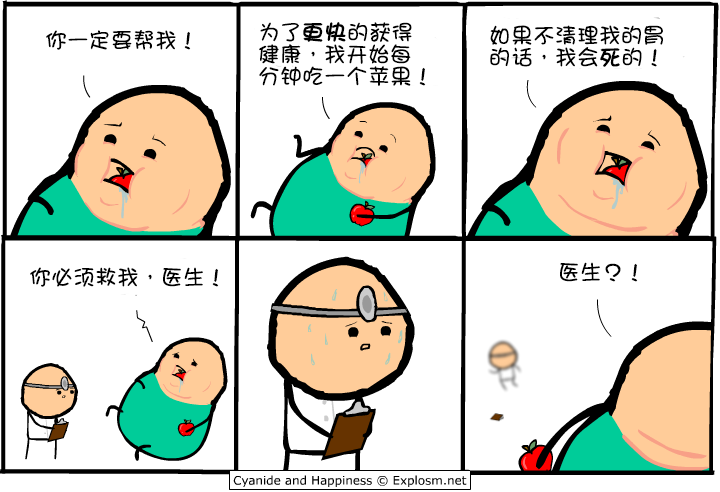
<style>
.page{position:relative;width:720px;height:492px;background:#ffffff}
.page>*{position:absolute;margin:0}
.t1{font:22px "DFGirl";color:#000000}
.t2{font:22px/22px "DFGirl";color:#000000}
.t3{font:22px/22px "DFGirl";color:#000000;font-weight:bold}
</style>
<div class="page">
<p class="t1" style="left:46px;top:30px;width:145px;height:20px">你一定要帮我！</p>
<p class="t2" style="left:259px;top:22px;width:167px;height:64px">为了<span class="t3">更快</span>的获得<br>健康，我开始每<br>分钟吃一个苹果！</p>
<p class="t2" style="left:490px;top:25px;width:173px;height:42px">如果不清理我的胃<br>的话，我会<span class="t3">死</span>的！</p>
<p class="t1" style="left:30px;top:267px;width:189px;height:20px">你必须救我，医生！</p>
<p class="t1" style="left:560px;top:262px;width:78px;height:20px">医生？！</p>
</div>
